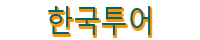
<style>
.page{position:relative;width:200px;height:40px;background:#ffffff}
.page>*{position:absolute;margin:0}
.t1{font:30px "MalgunGothic";color:#006478;scale:0.9 1}
</style>
<div class="page">
<p class="t1" style="left:48px;top:6px;width:103px;height:29px">한국투어</p>
</div>
